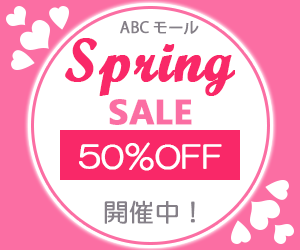
<style>
.page{position:relative;width:300px;height:250px;background:#ffffff}
.page>*{position:absolute;margin:0}
.t1{font:15px "KozGoPr6N-Regular";color:#858088;font-weight:bold}
.t2{font:60px "ScriptMTBold";color:#f92868;font-weight:bold}
.t3{font:35px "MicrosoftPhagsPa-Bold";color:#fb6ea3;font-weight:bold}
.t4{font:30px "HGMaruGothicMPRO";color:#ffffff;font-weight:bold}
.t5{font:25px "HGMaruGothicMPRO";color:#858088;font-weight:bold}
</style>
<div class="page">
<p class="t1" style="left:120px;top:21px;width:79px;height:14px">ABCモール</p>
<p class="t2" style="left:65px;top:38px;width:170px;height:58px">Spring</p>
<p class="t3" style="left:109px;top:99px;width:83px;height:26px">SALE</p>
<p class="t4" style="left:79px;top:142px;width:143px;height:29px">50％OFF</p>
<p class="t5" style="left:104px;top:200px;width:91px;height:24px">開催中！</p>
</div>
